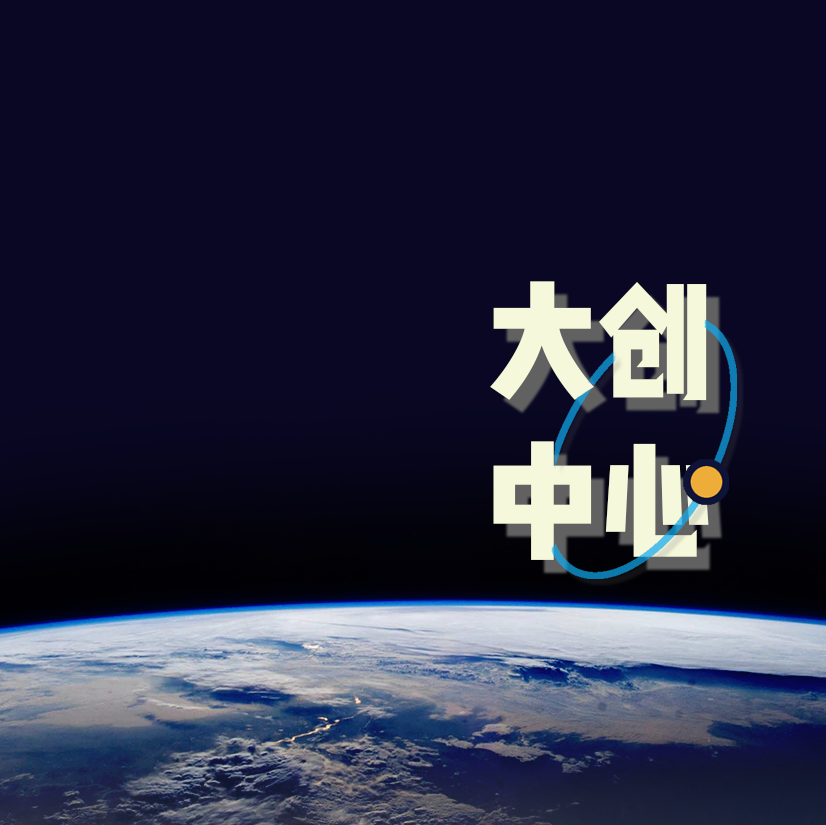
<style>
.page{position:relative;width:826px;height:825px;background:#090723}
.page>*{position:absolute;margin:0}
.t1{font:133.3px "WenYue-XinQingNianTi-NC-W8";color:#f6f8dc}
</style>
<div class="page">
<p class="t1" style="left:490px;top:281px;width:219px;height:279px;text-align:right">大创<br>中心</p>
</div>
